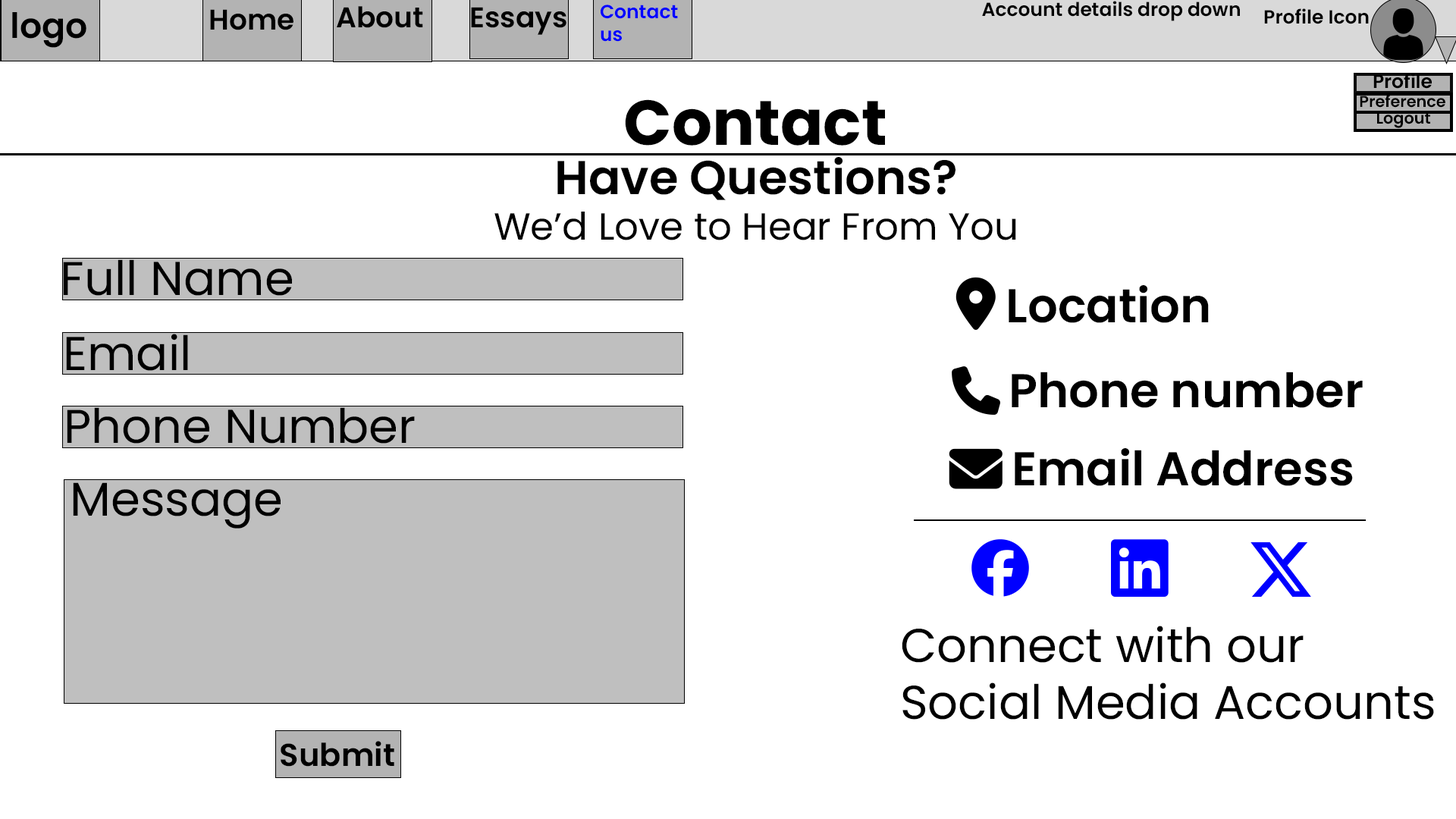
<style>
.page{position:relative;width:1456px;height:819px;background:#ffffff}
.page>*{position:absolute;margin:0}
.t1{font:19px "Poppins-SemiBold";color:#0000ff}
.t2{font:19px "Poppins-SemiBold";color:#000000}
.t3{font:34.8px "Poppins-SemiBold";color:#000000}
.t4{font:28.4px "Poppins-SemiBold";color:#000000}
.t5{font:63.2px "Poppins-Bold";color:#000000}
.t6{font:15.8px "Poppins-SemiBold";color:#000000}
.t7{font:37.9px "Poppins-Regular";color:#000000}
.t8{font:47.4px "Poppins-SemiBold";color:#000000}
.t9{font:47.4px "Poppins-Regular";color:#000000}
.t10{font:31.6px "Poppins-SemiBold";color:#000000}
</style>
<div class="page">
<p class="t1" style="left:601px;top:5px;width:77px;height:37px">Contact us</p>
<p class="t2" style="left:982px;top:1px;width:258px;height:20px">Account details drop down</p>
<p class="t3" style="left:12px;top:12px;width:74px;height:36px">logo</p>
<p class="t4" style="left:210px;top:9px;width:83px;height:21px">Home</p>
<p class="t4" style="left:337px;top:6px;width:86px;height:22px">About</p>
<p class="t4" style="left:471px;top:7px;width:95px;height:28px">Essays</p>
<p class="t2" style="left:1264px;top:8px;width:105px;height:16px">Profile Icon</p>
<p class="t2" style="left:1373px;top:73px;width:59px;height:16px">Profile</p>
<p class="t5" style="left:625px;top:99px;width:260px;height:47px">Contact</p>
<p class="t6" style="left:1360px;top:94px;width:85px;height:14px">Preference</p>
<p class="t6" style="left:1377px;top:112px;width:53px;height:16px">Logout</p>
<p class="t7" style="left:494px;top:157px;width:522px;height:83px;text-align:center"><span class="t8">Have Questions?<br></span>We’d Love to Hear From You</p>
<p class="t9" style="left:63px;top:259px;width:229px;height:37px">Full Name</p>
<p class="t8" style="left:1009px;top:285px;width:200px;height:38px">Location</p>
<p class="t9" style="left:66px;top:334px;width:122px;height:37px">Email</p>
<p class="t8" style="left:1012px;top:372px;width:351px;height:36px">Phone number</p>
<p class="t9" style="left:67px;top:407px;width:348px;height:37px">Phone Number</p>
<p class="t8" style="left:1015px;top:448px;width:338px;height:38px">Email Address</p>
<p class="t9" style="left:73px;top:482px;width:208px;height:47px">Message</p>
<p class="t9" style="left:902px;top:626px;width:532px;height:94px">Connect with our <br>Social Media Accounts</p>
<p class="t10" style="left:281px;top:741px;width:113px;height:26px">Submit</p>
</div>
